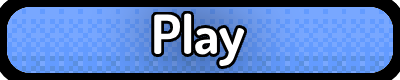
<style>
.page{position:relative;width:400px;height:80px;background:#000000}
.page>*{position:absolute;margin:0}
.t1{font:54px "Dosis-Bold";color:#ffffff}
</style>
<div class="page">
<p class="t1" style="left:154px;top:13px;width:91px;height:53px">Play</p>
</div>
